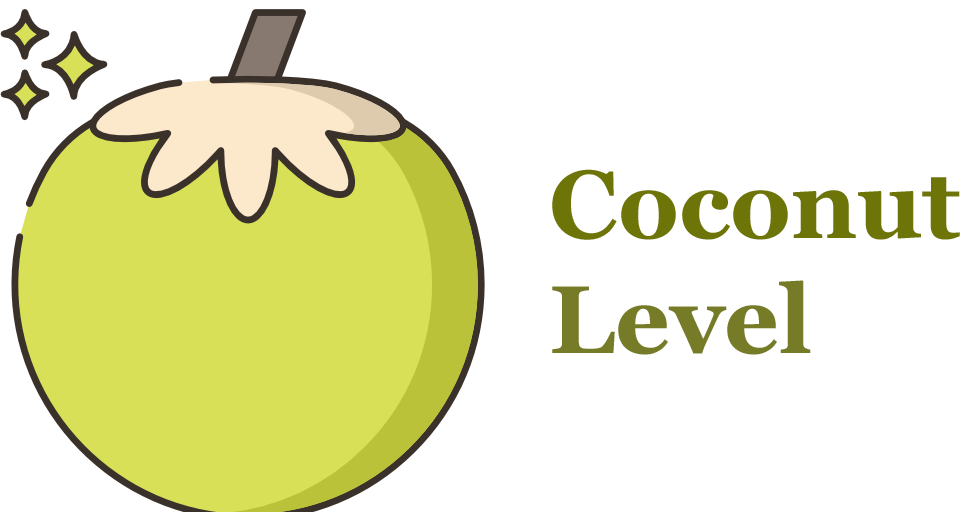
<style>
.page{position:relative;width:980px;height:512px;background:#ffffff}
.page>*{position:absolute;margin:0}
.t1{font:96px "Georgia-Bold";color:#6d7408}
.t2{font:96px "Georgia-Bold";color:#767b28}
</style>
<div class="page">
<p class="t1" style="left:552px;top:169px;width:408px;height:186px">Coconut <br><span class="t2">Level</span></p>
</div>
